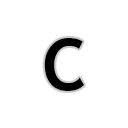
<style>
.page{position:relative;width:128px;height:128px;background:#ffffff}
.page>*{position:absolute;margin:0}
.t1{font:72px "TrebuchetMS-Bold";color:#000000}
</style>
<div class="page">
<p class="t1" style="left:44px;top:38px;width:40px;height:53px">C</p>
</div>
